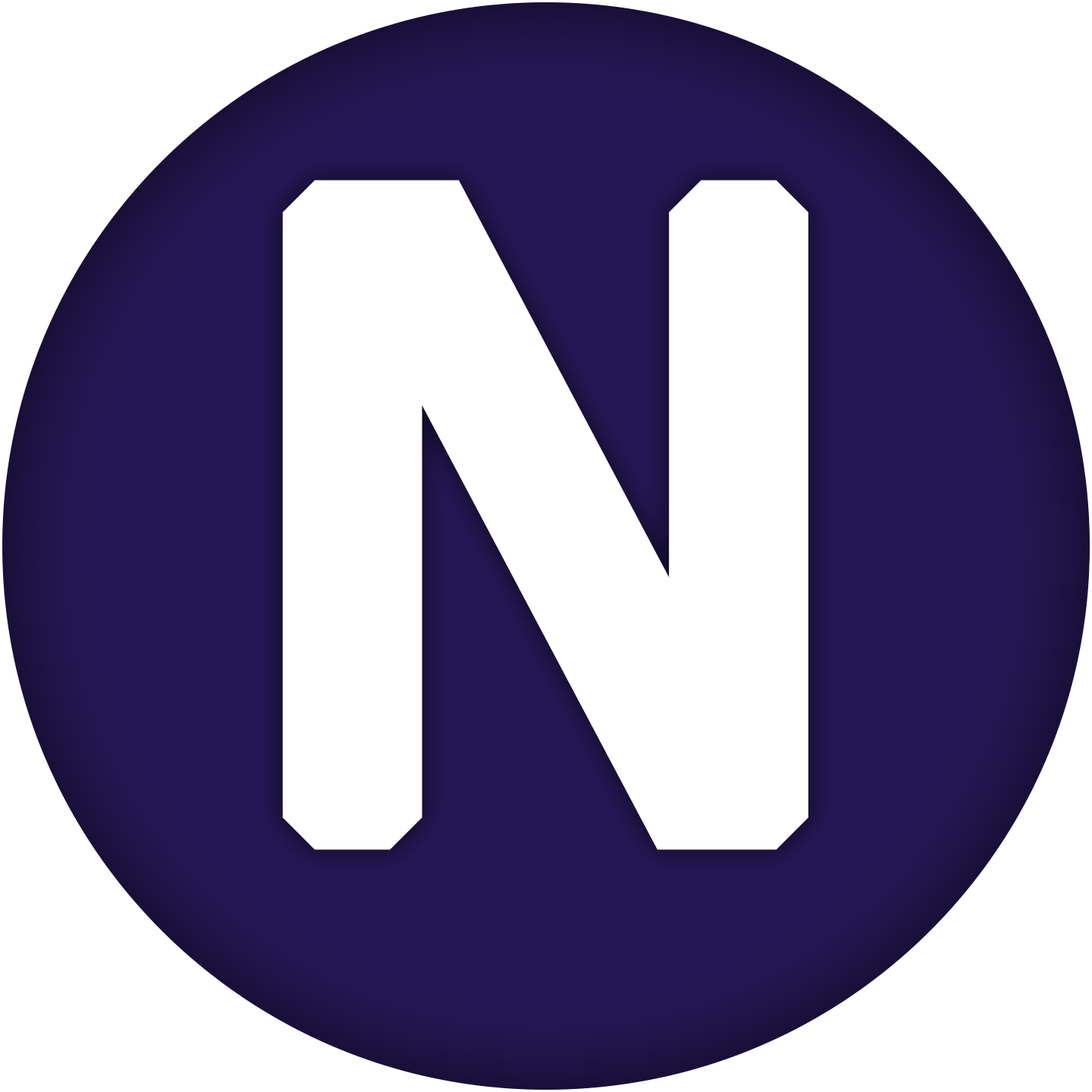
<style>
.page{position:relative;width:1092px;height:1092px;background:#ffffff}
.page>*{position:absolute;margin:0}
.t1{font:832px "Verdana";letter-spacing:0.05em;color:#ffffff;font-weight:bold}
</style>
<div class="page">
<p class="t1" style="left:282px;top:180px;width:526px;height:670px">N</p>
</div>
